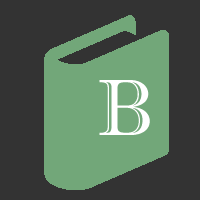
<style>
.page{position:relative;width:200px;height:200px;background:#333333}
.page>*{position:absolute;margin:0}
.t1{font:80px "ImprintMT-Shadow";color:#ffffff}
</style>
<div class="page">
<p class="t1" style="left:99px;top:80px;width:51px;height:55px">B</p>
</div>
